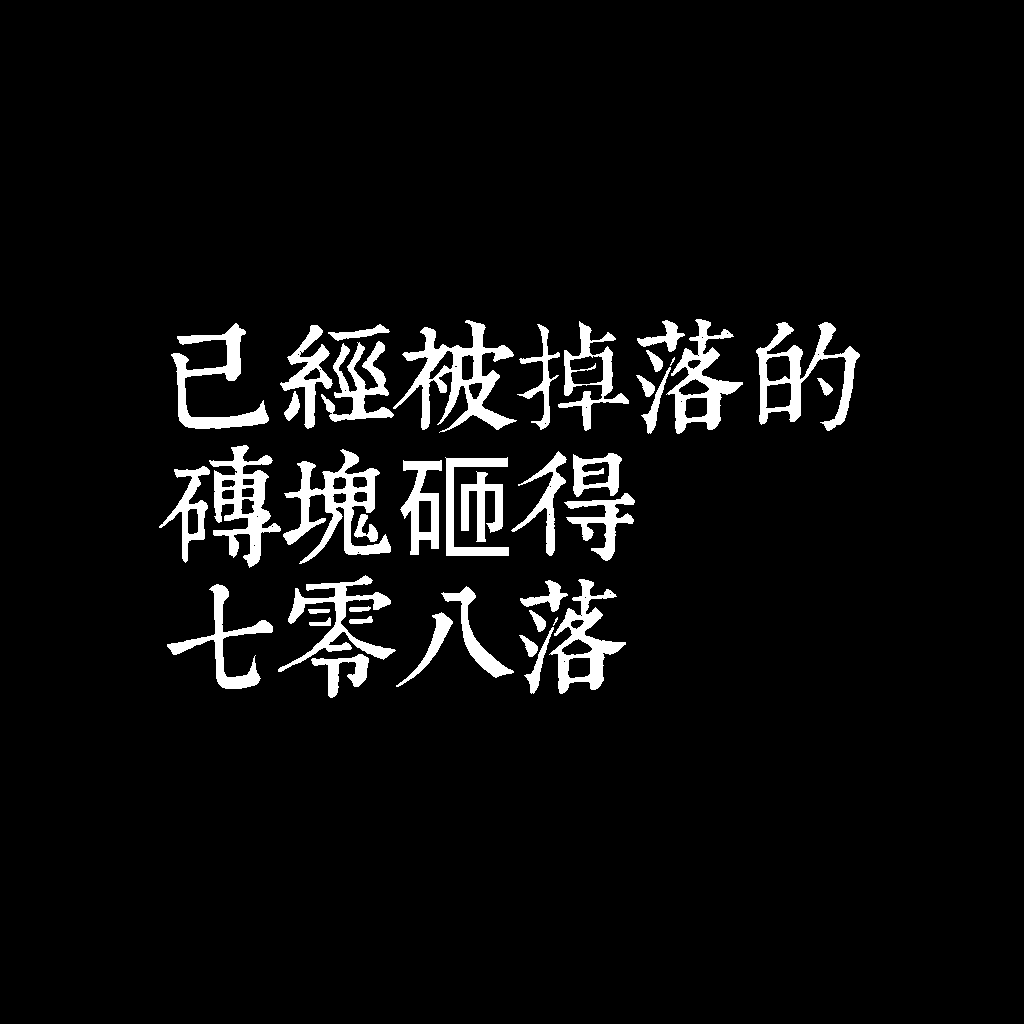
<style>
.page{position:relative;width:1024px;height:1024px;background:#000000}
.page>*{position:absolute;margin:0}
.t1{font:120px/130px "TpldKhangXiDictTrial";letter-spacing:-0.02em;color:#ffffff}
.t2{font:120px/130px "AdobeHeitiStd-Regular";letter-spacing:-0.02em;color:#ffffff}
</style>
<div class="page">
<p class="t1" style="left:159px;top:319px;width:701px;height:379px">已經被掉落的<br>磚塊<span class="t2">砸</span>得<br>七零八落</p>
</div>
